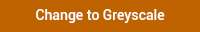
<style>
.page{position:relative;width:200px;height:32px;background:#bf6300}
.page>*{position:absolute;margin:0}
.t1{font:14px "Roboto-Medium";color:#ffffff}
</style>
<div class="page">
<p class="t1" style="left:36px;top:9px;width:129px;height:14px">Change to Greyscale</p>
</div>
